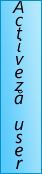
<style>
.page{position:relative;width:42px;height:174px}
.page>*{position:absolute;margin:0}
.t1{font:18px/13px "SegoeUI-Italic";color:#000102}
</style>
<div class="page">
<p class="t1" style="left:12px;top:0px;width:12px;height:169px;text-align:center">A<br>c<br>t<br>i<br>v<br>e<br>z<br>ă<br><br>u<br>s<br>e<br>r</p>
</div>
